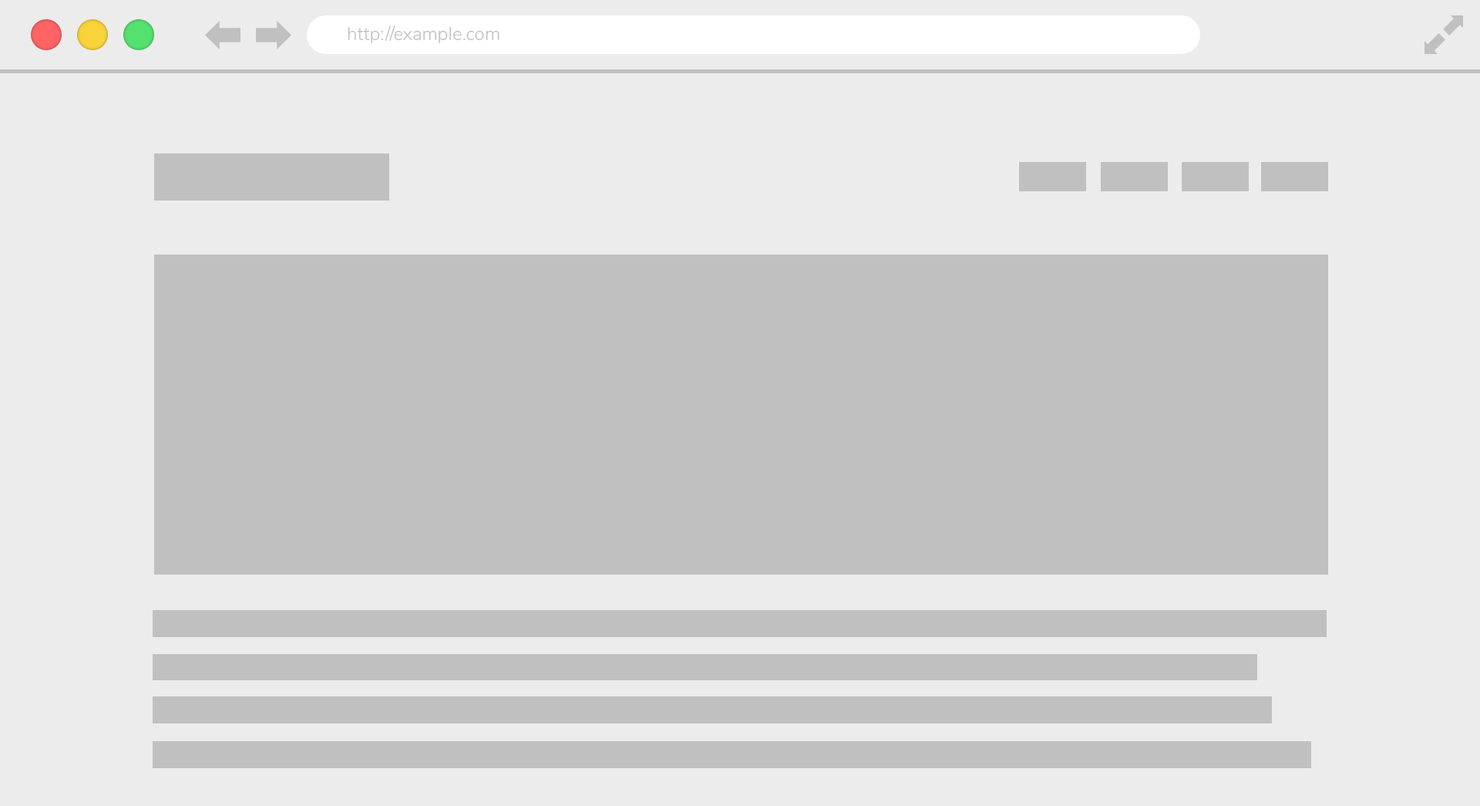
<style>
.page{position:relative;width:1480px;height:806px;background:#ececec}
.page>*{position:absolute;margin:0}
.t1{font:18.5px "Nunito-Light";color:#c0c0c0}
</style>
<div class="page">
<p class="t1" style="left:348px;top:25px;width:152px;height:18px">http://example.com</p>
</div>
